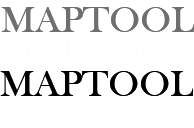
<style>
.page{position:relative;width:194px;height:128px;background:#ffffff}
.page>*{position:absolute;margin:0}
.t1{font:38px "BaskOldFace";color:#706f70}
.t2{font:38px "BaskOldFace";color:#000000}
</style>
<div class="page">
<p class="t1" style="left:1px;top:7px;width:193px;height:25px">MAPTOOL</p>
<p class="t2" style="left:0px;top:71px;width:193px;height:25px">MAPTOOL</p>
</div>
